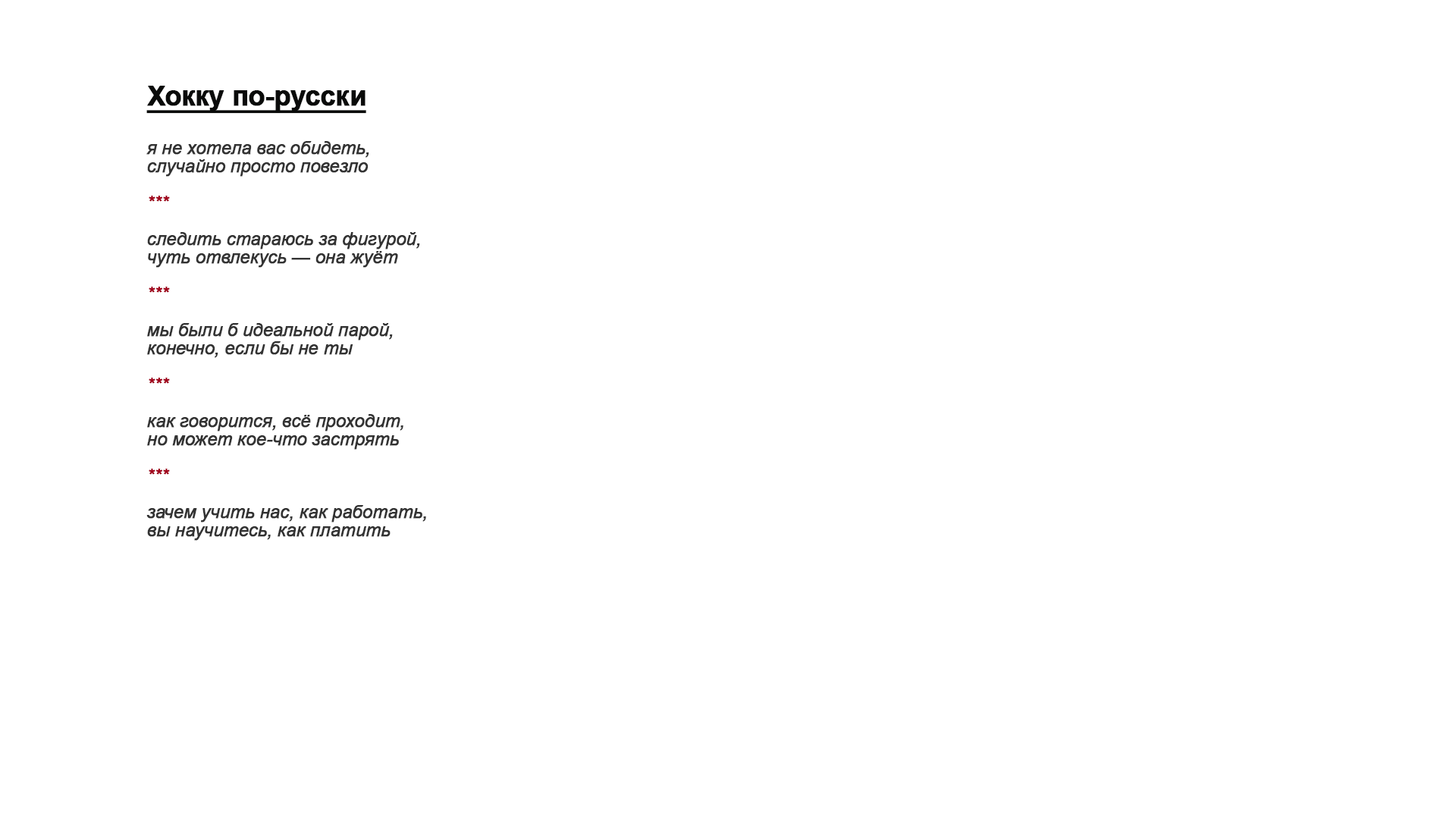
<style>
.page{position:relative;width:1456px;height:819px;background:#ffffff}
.page>*{position:absolute;margin:0}
.t1{font:18.2px/18.2px "Arial-ItalicMT";letter-spacing:-0.025em;color:#333333;font-weight:bold}
.t2{font:27.3px/30.3px "Arial-BoldMT";letter-spacing:-0.025em;color:#0a0b0a;font-weight:bold;text-decoration:underline}
.t3{font:18.2px/18.2px "Arial-ItalicMT";letter-spacing:-0.025em;color:#a0001a;font-weight:bold}
</style>
<div class="page">
<p class="t1" style="left:146px;top:86px;width:280px;height:455px"><span class="t2">Хокку по-русски<br><br></span>я не хотела вас обидеть,<br>случайно просто повезло<br><br><span class="t3">***<br></span><br>следить стараюсь за фигурой,<br>чуть отвлекусь — она жуёт<br><br><span class="t3">***<br></span><br>мы были б идеальной парой,<br>конечно, если бы не ты<br><br><span class="t3">***<br></span><br>как говорится, всё проходит,<br>но может кое-что застрять<br><br><span class="t3">***<br></span><br>зачем учить нас, как работать,<br>вы научитесь, как платить</p>
</div>
